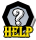
<style>
.page{position:relative;width:36px;height:40px;background:#ffffff}
.page>*{position:absolute;margin:0}
.t1{font:24.7px "Algerian";color:#ffffff}
.t2{font:14.8px "Algerian";color:#fee512;scale:0.8 1}
</style>
<div class="page">
<p class="t1" style="left:13px;top:9px;width:11px;height:17px">?</p>
<p class="t2" style="left:4px;top:26px;width:29px;height:11px">HELP</p>
</div>
